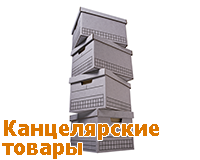
<style>
.page{position:relative;width:200px;height:160px;background:#ffffff}
.page>*{position:absolute;margin:0}
.t1{font:20.8px/18.7px "Tahoma-Bold";color:#dd7700}
</style>
<div class="page">
<p class="t1" style="left:2px;top:120px;width:157px;height:39px">Канцелярские<br>товары</p>
</div>
